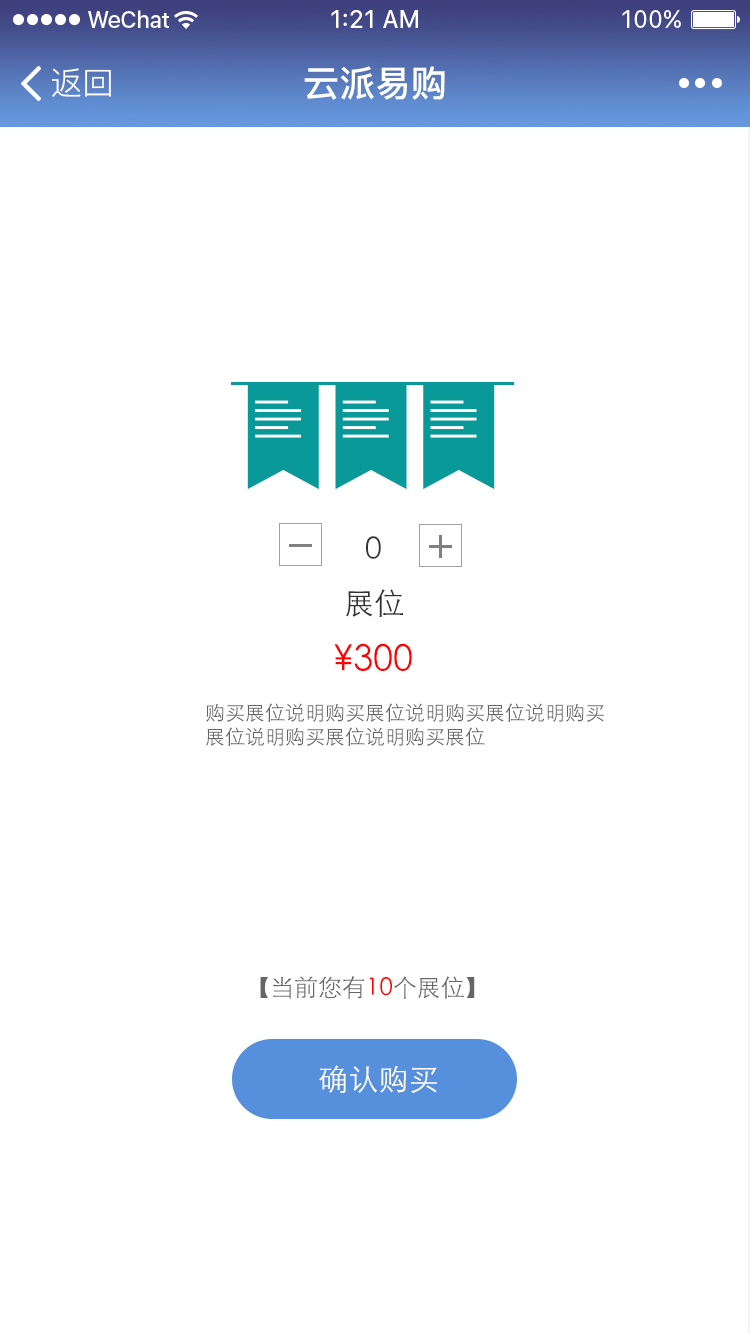
<style>
.page{position:relative;width:750px;height:1334px;background:#ffffff}
.page>*{position:absolute;margin:0}
.t1{font:32px "PingFang-SC-Regular";color:#ffffff}
.t2{font:36px "PingFang-SC-Bold";color:#ffffff}
.t3{font:30px "STXihei";color:#333333}
.t4{font:36px "STXihei";color:#ff0000}
.t5{font:20px "STXihei";color:#666666}
.t6{font:24px "STXihei";color:#666666}
.t7{font:24px "STXihei";color:#ff0000}
.t8{font:30px "STXihei";color:#ffffff}
</style>
<div class="page">
<p class="t1" style="left:52px;top:68px;width:59px;height:29px">返回</p>
<p class="t2" style="left:304px;top:66px;width:141px;height:34px">云派易购</p>
<p class="t3" style="left:366px;top:536px;width:15px;height:23px">0</p>
<p class="t3" style="left:345px;top:589px;width:58px;height:28px">展位</p>
<p class="t4" style="left:334px;top:643px;width:78px;height:28px">¥300</p>
<p class="t5" style="left:206px;top:703px;width:398px;height:43px">购买展位说明购买展位说明购买展位说明购买展位说明购买展位说明购买展位</p>
<p class="t6" style="left:260px;top:976px;width:215px;height:23px">【当前您有<span class="t7">10</span>个展位】</p>
<p class="t8" style="left:319px;top:1065px;width:118px;height:28px">确认购买</p>
</div>
